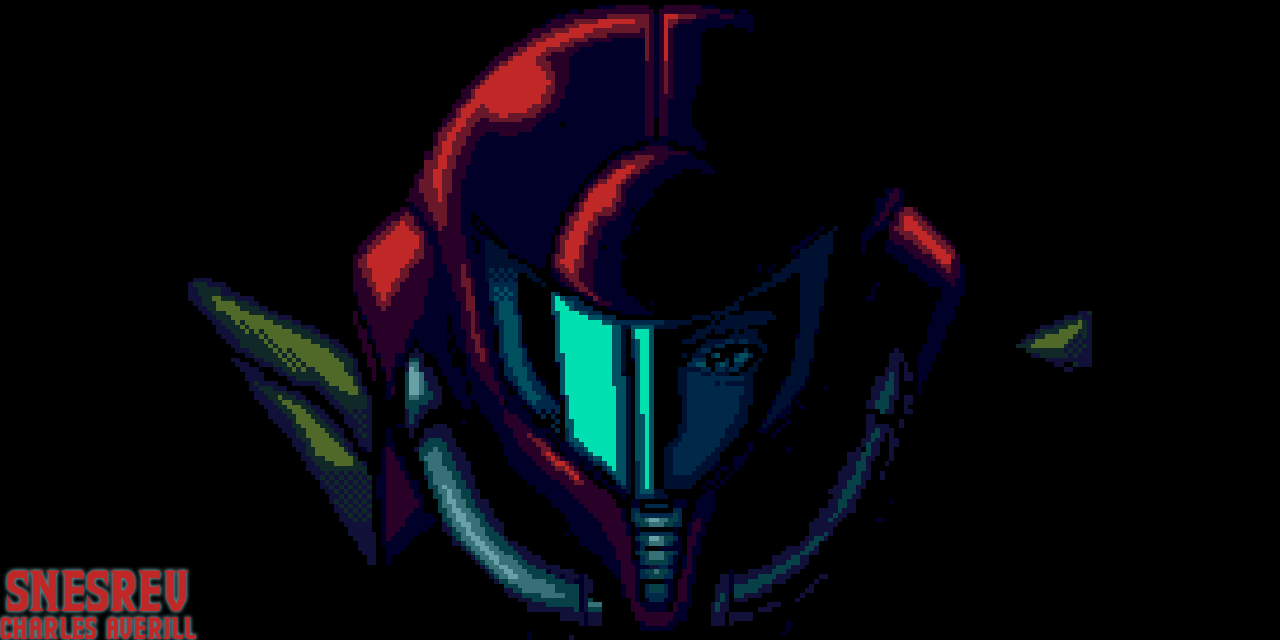
<style>
.page{position:relative;width:1280px;height:640px;background:#000000}
.page>*{position:absolute;margin:0}
.t1{font:23px "SuperMetroidTitle";color:#c02828}
.t2{font:42.9px "SuperMetroidTitle";color:#c02828}
</style>
<div class="page">
<p class="t1" style="left:0px;top:570px;width:196px;height:70px;text-align:center"><span class="t2">snesrev<br></span>charles averill</p>
</div>
